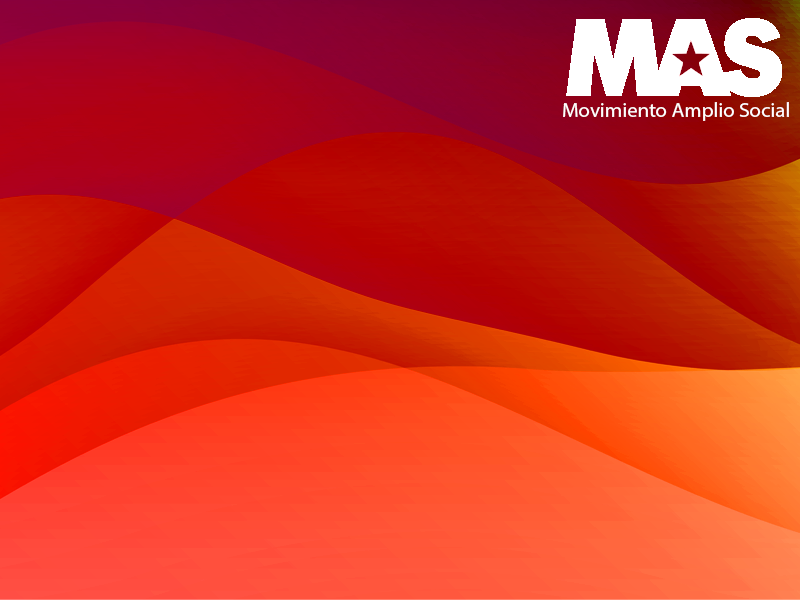
<style>
.page{position:relative;width:800px;height:600px}
.page>*{position:absolute;margin:0}
.t1{font:20.8px "MyriadPro-Regular";color:#ffffff}
</style>
<div class="page">
<p class="t1" style="left:563px;top:102px;width:226px;height:19px">Movimiento Amplio Social</p>
</div>
